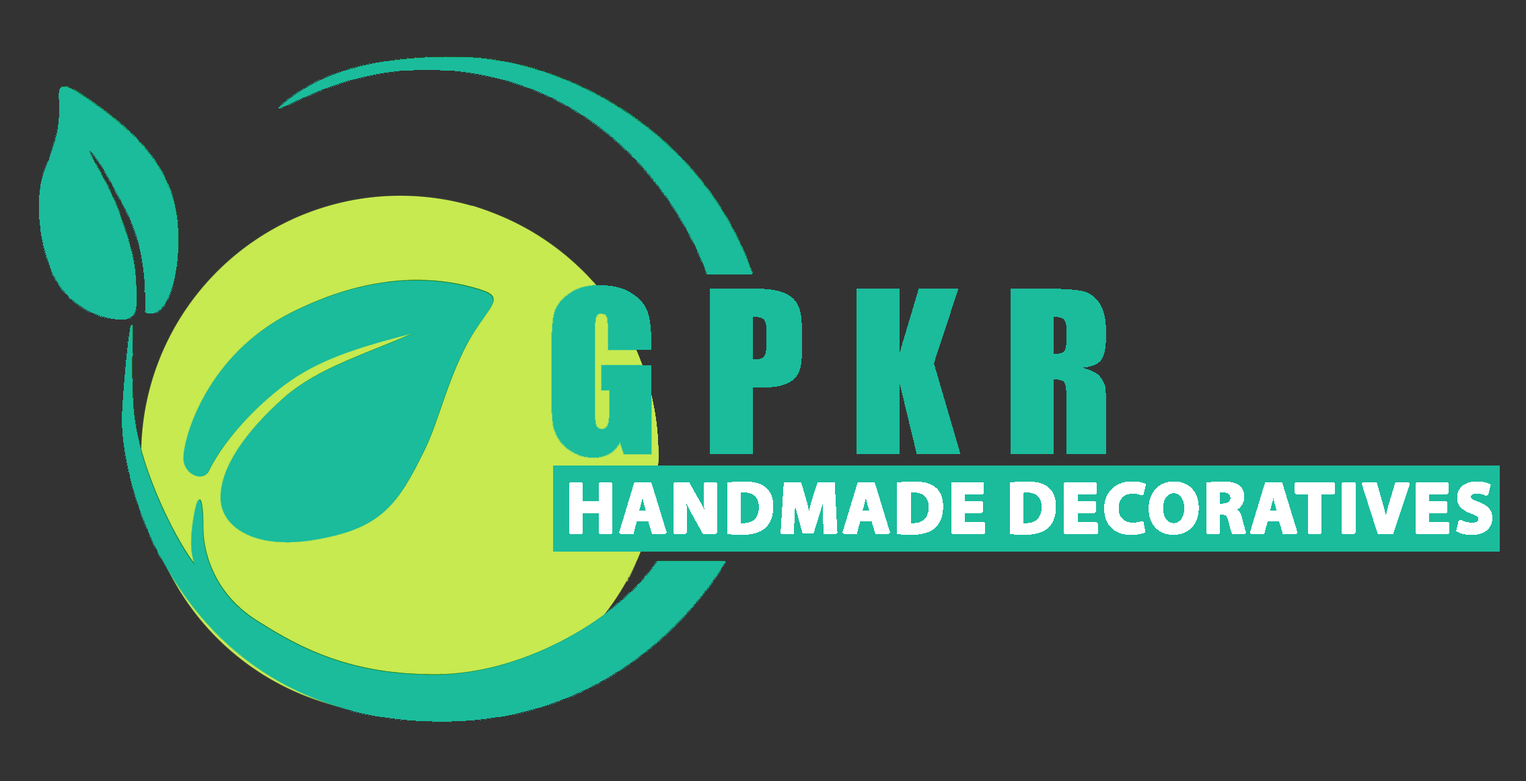
<style>
.page{position:relative;width:1526px;height:781px;background:#333333}
.page>*{position:absolute;margin:0}
.t1{font:73.1px "MyriadPro-Bold";color:#ffffff;text-transform:uppercase;font-weight:bold}
</style>
<div class="page">
<p class="t1" style="left:569px;top:482px;width:924px;height:53px">Handmade Decoratives</p>
</div>
